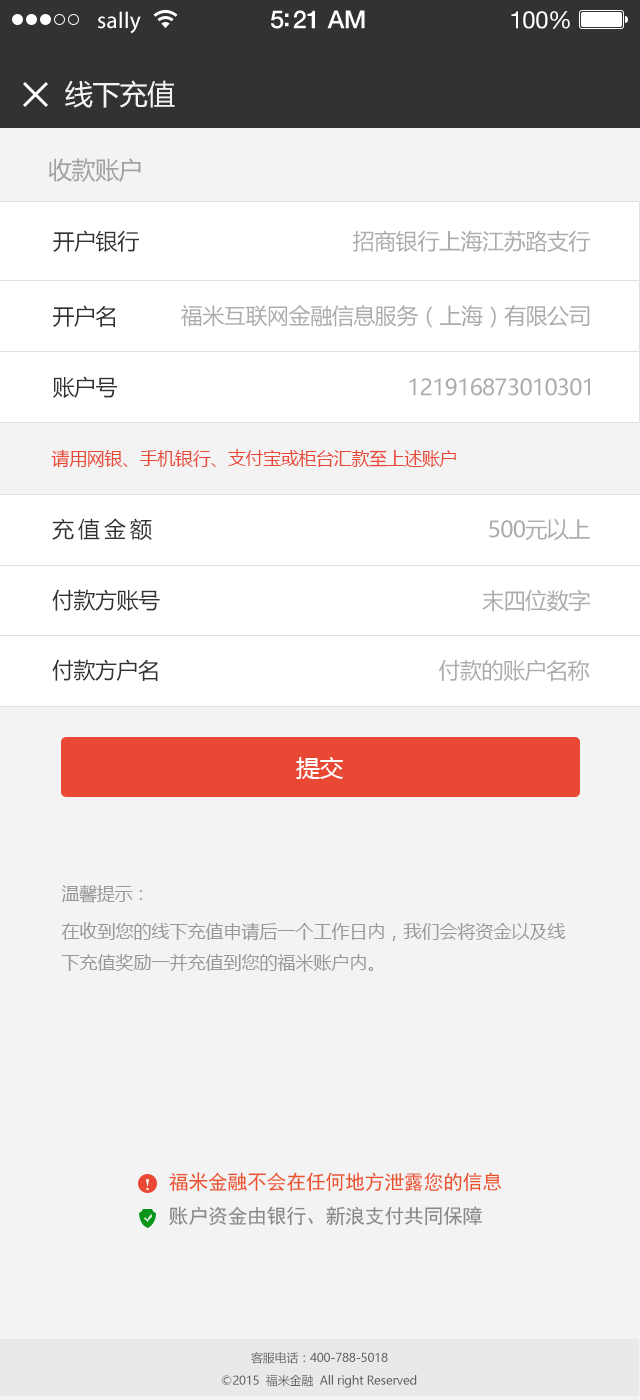
<style>
.page{position:relative;width:640px;height:1400px;background:#f3f3f3}
.page>*{position:absolute;margin:0}
.t1{font:23px "MyriadPro-Regular";letter-spacing:0.02em;color:#ffffff}
.t2{font:25px "HelveticaNeue-Medium";letter-spacing:-0.02em;color:#ffffff}
.t3{font:24px "HelveticaNeue";letter-spacing:-0.02em;color:#ffffff}
.t4{font:28px "MicrosoftYaHei";letter-spacing:-0.02em;color:#f3f3f3}
.t5{font:24px "MicrosoftYaHei";letter-spacing:-0.02em;color:#a2a2a2}
.t6{font:22px "MicrosoftYaHei";letter-spacing:-0.02em;color:#323232}
.t7{font:22px "MicrosoftYaHei";letter-spacing:-0.02em;color:#acacac}
.t8{font:18px "MicrosoftYaHei";letter-spacing:-0.02em;color:#e94834}
.t9{font:22px "MicrosoftYaHei";letter-spacing:0.18em;color:#323232}
.t10{font:24px "MicrosoftYaHei";letter-spacing:-0.02em;color:#ffffff}
.t11{font:18px "MicrosoftYaHei";letter-spacing:-0.02em;color:#989898}
.t12{font:18px/31px "MicrosoftYaHei";color:#989898}
.t13{font:20px "SimHei";letter-spacing:-0.02em;color:#ea522b}
.t14{font:20px "SimHei";letter-spacing:-0.02em;color:#878787}
.t15{font:12px "MicrosoftYaHei";letter-spacing:-0.02em;color:#646464}
</style>
<div class="page">
<p class="t1" style="left:98px;top:11px;width:43px;height:23px">sally</p>
<p class="t2" style="left:271px;top:10px;width:94px;height:19px">5:21 AM</p>
<p class="t3" style="left:511px;top:11px;width:59px;height:18px">100%</p>
<p class="t4" style="left:65px;top:80px;width:110px;height:28px">线下充值</p>
<p class="t5" style="left:48px;top:158px;width:93px;height:24px">收款账户</p>
<p class="t6" style="left:53px;top:230px;width:86px;height:22px">开户银行</p>
<p class="t7" style="left:353px;top:230px;width:237px;height:22px">招商银行上海江苏路支行</p>
<p class="t6" style="left:53px;top:305px;width:62px;height:22px">开户名</p>
<p class="t7" style="left:181px;top:305px;width:409px;height:23px">福米互联网金融信息服务（上海）有限公司</p>
<p class="t6" style="left:53px;top:376px;width:65px;height:22px">账户号</p>
<p class="t7" style="left:409px;top:378px;width:181px;height:18px">121916873010301</p>
<p class="t8" style="left:51px;top:449px;width:405px;height:19px">请用网银、手机银行、支付宝或柜台汇款至上述账户</p>
<p class="t9" style="left:52px;top:518px;width:100px;height:23px">充值金额</p>
<p class="t7" style="left:489px;top:518px;width:101px;height:23px">500元以上</p>
<p class="t6" style="left:52px;top:589px;width:108px;height:22px">付款方账号</p>
<p class="t7" style="left:482px;top:589px;width:108px;height:23px">末四位数字</p>
<p class="t6" style="left:52px;top:659px;width:106px;height:22px">付款方户名</p>
<p class="t7" style="left:439px;top:659px;width:151px;height:23px">付款的账户名称</p>
<p class="t10" style="left:296px;top:757px;width:47px;height:22px">提交</p>
<p class="t11" style="left:61px;top:885px;width:82px;height:18px">温馨提示：</p>
<p class="t12" style="left:61px;top:922px;width:505px;height:50px">在收到您的线下充值申请后一个工作日内，我们会将资金以及线下充值奖励一并充值到您的福米账户内。</p>
<p class="t13" style="left:169px;top:1172px;width:333px;height:20px">福米金融不会在任何地方泄露您的信息</p>
<p class="t14" style="left:169px;top:1206px;width:313px;height:20px">账户资金由银行、新浪支付共同保障</p>
<p class="t15" style="left:251px;top:1352px;width:137px;height:12px">客服电话：400-788-5018</p>
<p class="t15" style="left:221px;top:1374px;width:196px;height:14px">©2015  福米金融  All right Reserved</p>
</div>
